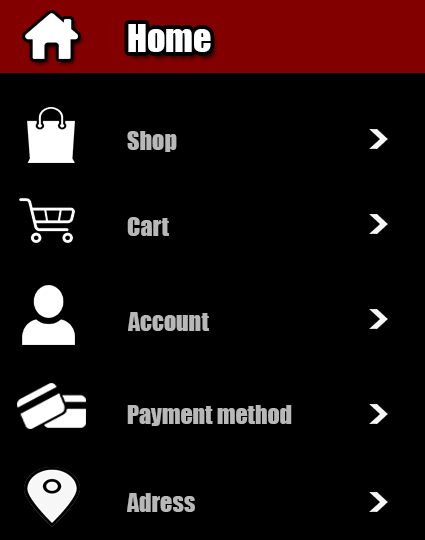
<style>
.page{position:relative;width:425px;height:540px;background:#000000}
.page>*{position:absolute;margin:0}
.t1{font:36px "Impact";color:#ffffff}
.t2{font:24px "Impact";color:#b8b8b8}
</style>
<div class="page">
<p class="t1" style="left:128px;top:24px;width:83px;height:28px">Home</p>
<p class="t2" style="left:127px;top:131px;width:50px;height:21px">Shop</p>
<p class="t2" style="left:127px;top:217px;width:42px;height:19px">Cart</p>
<p class="t2" style="left:128px;top:312px;width:81px;height:19px">Account</p>
<p class="t2" style="left:127px;top:405px;width:165px;height:21px">Payment method</p>
<p class="t2" style="left:127px;top:493px;width:68px;height:19px">Adress</p>
</div>
